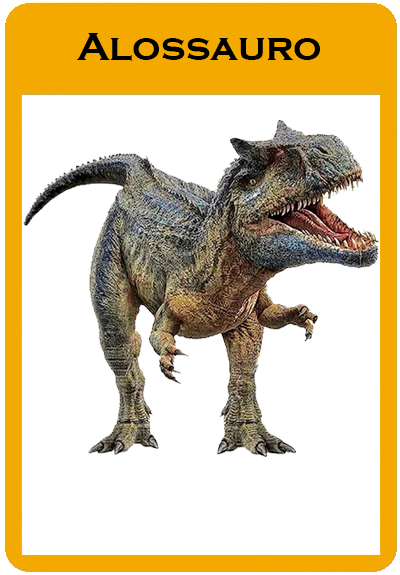
<style>
.page{position:relative;width:400px;height:575px;background:#ffffff}
.page>*{position:absolute;margin:0}
.t1{font:40px "CopperplateGothic-Bold";color:#000000}
</style>
<div class="page">
<p class="t1" style="left:77px;top:33px;width:243px;height:28px">Alossauro</p>
</div>
